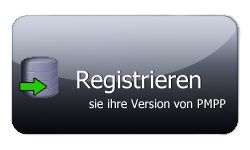
<style>
.page{position:relative;width:250px;height:150px;background:#ffffff}
.page>*{position:absolute;margin:0}
.t1{font:24px "Tahoma";color:#ffffff}
.t2{font:12px "Tahoma";color:#ffffff}
</style>
<div class="page">
<p class="t1" style="left:77px;top:70px;width:124px;height:24px">Registrieren</p>
<p class="t2" style="left:89px;top:99px;width:137px;height:10px">sie ihre Version von PMPP</p>
</div>
